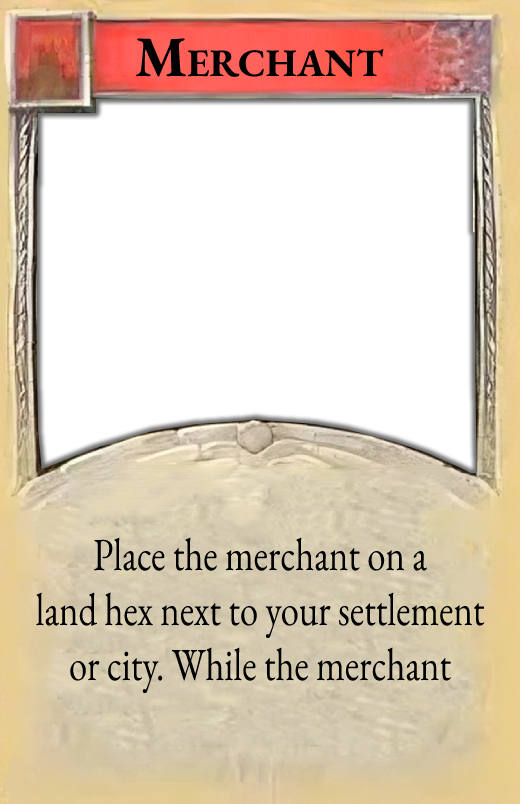
<style>
.page{position:relative;width:520px;height:804px;background:#ffffff}
.page>*{position:absolute;margin:0}
.t1{font:39px "EBGaramond-Bold";color:#000000}
.t2{font:57px "EBGaramond-Bold";color:#000000}
.t3{font:46px "EBGaramond-Regular";color:#000000;scale:0.8 1}
</style>
<div class="page">
<p class="t1" style="left:135px;top:38px;width:249px;height:39px"><span class="t2">M</span>ERCHANT</p>
<p class="t3" style="left:36px;top:537px;width:449px;height:157px;text-align:center">Place the merchant on a<br>land hex next to your settlement<br>or city. While the merchant</p>
</div>
